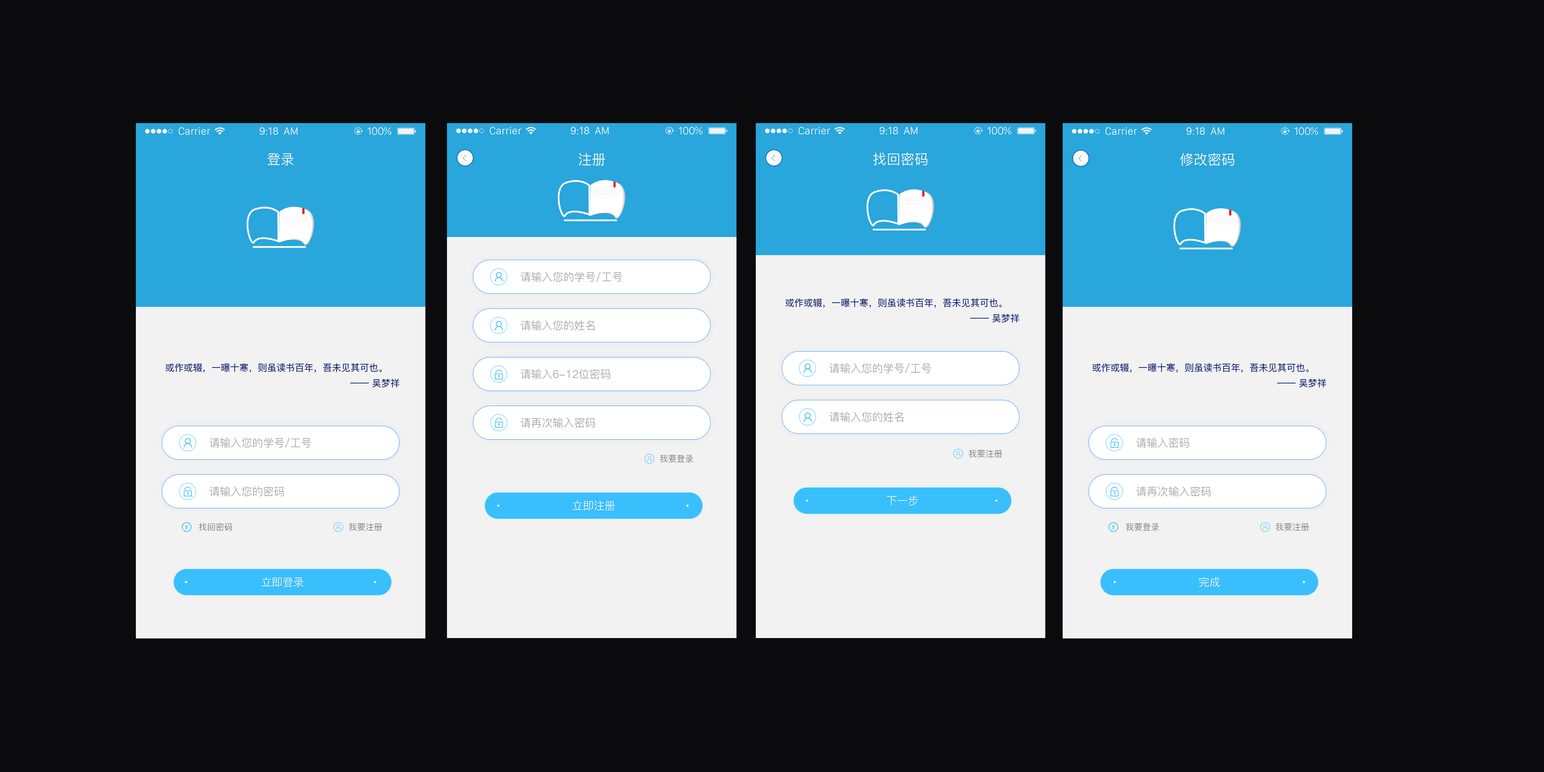
<style>
.page{position:relative;width:1544px;height:772px;background:#0b0b0e}
.page>*{position:absolute;margin:0}
.t1{font:10.8px "SanFranciscoDisplay-Regular";color:#f2f2f2}
.t2{font:10.8px "SanFranciscoDisplay-Regular";letter-spacing:0.02em;color:#f2f2f2;text-transform:uppercase}
.t3{font:10.8px "SanFranciscoDisplay-Regular";color:#f2f2f2;scale:1.05 1}
.t4{font:13.9px "PingFang-SC-Medium";color:#f2f2f2;text-transform:uppercase}
.t5{font:10.8px "PingFang-SC-Regular";color:#999999}
.t6{font:9.3px/15.4px "PingFang-SC-Medium";color:#0a196b;text-transform:uppercase}
.t7{font:8.5px "PingFang-SC-Regular";color:#666666}
.t8{font:10.8px "PingFang-SC-Regular";color:#ffffff;text-transform:uppercase}
</style>
<div class="page">
<p class="t1" style="left:179px;top:127px;width:31px;height:8px">Carrier</p>
<p class="t2" style="left:259px;top:127px;width:39px;height:8px">9:18  AM</p>
<p class="t3" style="left:368px;top:127px;width:23px;height:8px">100%</p>
<p class="t1" style="left:490px;top:127px;width:32px;height:8px">Carrier</p>
<p class="t2" style="left:571px;top:127px;width:38px;height:7px">9:18  AM</p>
<p class="t3" style="left:679px;top:127px;width:24px;height:8px">100%</p>
<p class="t1" style="left:799px;top:127px;width:31px;height:8px">Carrier</p>
<p class="t2" style="left:879px;top:127px;width:39px;height:7px">9:18  AM</p>
<p class="t3" style="left:988px;top:127px;width:24px;height:8px">100%</p>
<p class="t1" style="left:1106px;top:127px;width:31px;height:8px">Carrier</p>
<p class="t2" style="left:1186px;top:127px;width:39px;height:8px">9:18  AM</p>
<p class="t3" style="left:1295px;top:127px;width:23px;height:8px">100%</p>
<p class="t4" style="left:267px;top:153px;width:27px;height:13px">登录</p>
<p class="t4" style="left:579px;top:153px;width:26px;height:13px">注册</p>
<p class="t4" style="left:873px;top:152px;width:55px;height:14px">找回密码</p>
<p class="t4" style="left:1180px;top:153px;width:55px;height:13px">修改密码</p>
<p class="t5" style="left:520px;top:271px;width:102px;height:11px">请输入您的学号/工号</p>
<p class="t6" style="left:786px;top:298px;width:234px;height:25px">或作或辍，一曝十寒，则虽读书百年，吾未见其可也。<br>                                                            —— 吴梦祥</p>
<p class="t5" style="left:520px;top:320px;width:75px;height:10px">请输入您的姓名</p>
<p class="t6" style="left:166px;top:363px;width:234px;height:25px">或作或辍，一曝十寒，则虽读书百年，吾未见其可也。<br>                                                            —— 吴梦祥</p>
<p class="t5" style="left:829px;top:363px;width:102px;height:10px">请输入您的学号/工号</p>
<p class="t6" style="left:1093px;top:363px;width:234px;height:25px">或作或辍，一曝十寒，则虽读书百年，吾未见其可也。<br>                                                            —— 吴梦祥</p>
<p class="t5" style="left:520px;top:369px;width:90px;height:10px">请输入6-12位密码</p>
<p class="t5" style="left:829px;top:412px;width:74px;height:10px">请输入您的姓名</p>
<p class="t5" style="left:520px;top:418px;width:75px;height:10px">请再次输入密码</p>
<p class="t5" style="left:209px;top:437px;width:102px;height:11px">请输入您的学号/工号</p>
<p class="t5" style="left:1136px;top:438px;width:53px;height:10px">请输入密码</p>
<p class="t7" style="left:969px;top:450px;width:33px;height:8px">我要注册</p>
<p class="t7" style="left:660px;top:455px;width:33px;height:8px">我要登录</p>
<p class="t5" style="left:209px;top:486px;width:75px;height:10px">请输入您的密码</p>
<p class="t8" style="left:887px;top:496px;width:31px;height:10px">下一步</p>
<p class="t5" style="left:1136px;top:486px;width:75px;height:10px">请再次输入密码</p>
<p class="t8" style="left:573px;top:501px;width:42px;height:10px">立即注册</p>
<p class="t7" style="left:199px;top:523px;width:33px;height:8px">找回密码</p>
<p class="t7" style="left:349px;top:523px;width:33px;height:8px">我要注册</p>
<p class="t7" style="left:1126px;top:523px;width:33px;height:8px">我要登录</p>
<p class="t7" style="left:1276px;top:523px;width:33px;height:8px">我要注册</p>
<p class="t8" style="left:261px;top:577px;width:43px;height:10px">立即登录</p>
<p class="t8" style="left:1199px;top:577px;width:21px;height:10px">完成</p>
</div>
